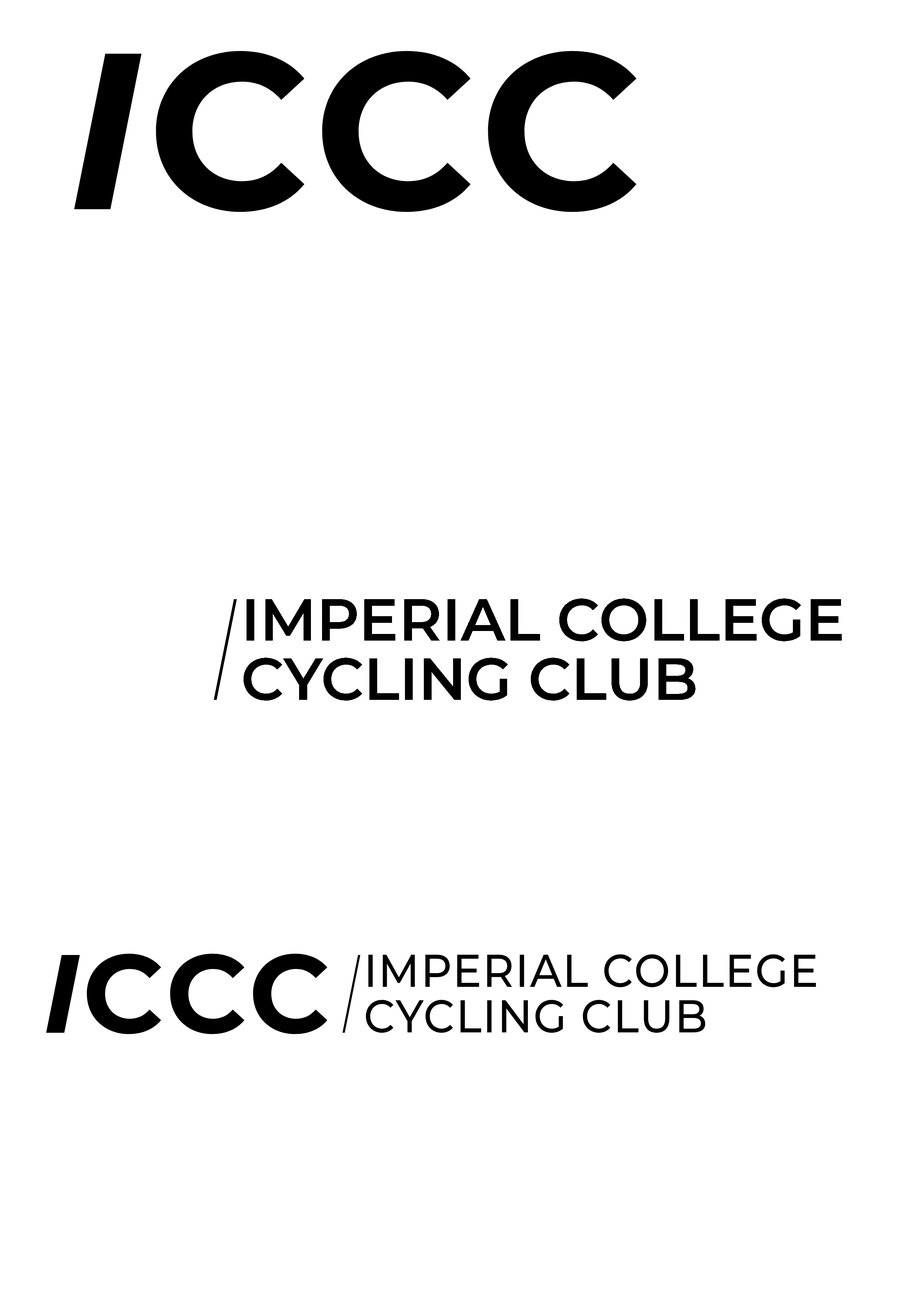
<style>
.page{position:relative;width:918px;height:1299px;background:#ffffff}
.page>*{position:absolute;margin:0}
.t1{font:222.1px "Montserrat-Bold";letter-spacing:0.03em;color:#000000}
.t2{font:222.1px "Montserrat-BoldItalic";letter-spacing:0.03em;color:#000000}
.t3{font:143.9px "Montserrat-ThinItalic";letter-spacing:0.03em;color:#000000}
.t4{font:59.2px/59.2px "Montserrat-SemiBold";color:#000000}
.t5{font:111.1px "Montserrat-Bold";letter-spacing:0.03em;color:#000000}
.t6{font:111.1px "Montserrat-BoldItalic";letter-spacing:0.03em;color:#000000}
.t7{font:111.1px "Montserrat-ThinItalic";letter-spacing:0.03em;color:#000000}
.t8{font:45.9px/45.5px "Montserrat-Medium";letter-spacing:0.03em;color:#000000;scale:0.94 1}
</style>
<div class="page">
<p class="t1" style="left:74px;top:51px;width:563px;height:161px"><span class="t2">I</span>CCC</p>
<p class="t3" style="left:214px;top:599px;width:23px;height:101px">I</p>
<p class="t4" style="left:244px;top:598px;width:598px;height:102px">IMPERIAL COLLEGE<br>CYCLING CLUB</p>
<p class="t5" style="left:46px;top:953px;width:315px;height:81px"><span class="t6">I</span>CCC<span class="t7">I</span></p>
<p class="t8" style="left:366px;top:954px;width:450px;height:79px">IMPERIAL COLLEGE<br>CYCLING CLUB</p>
</div>
